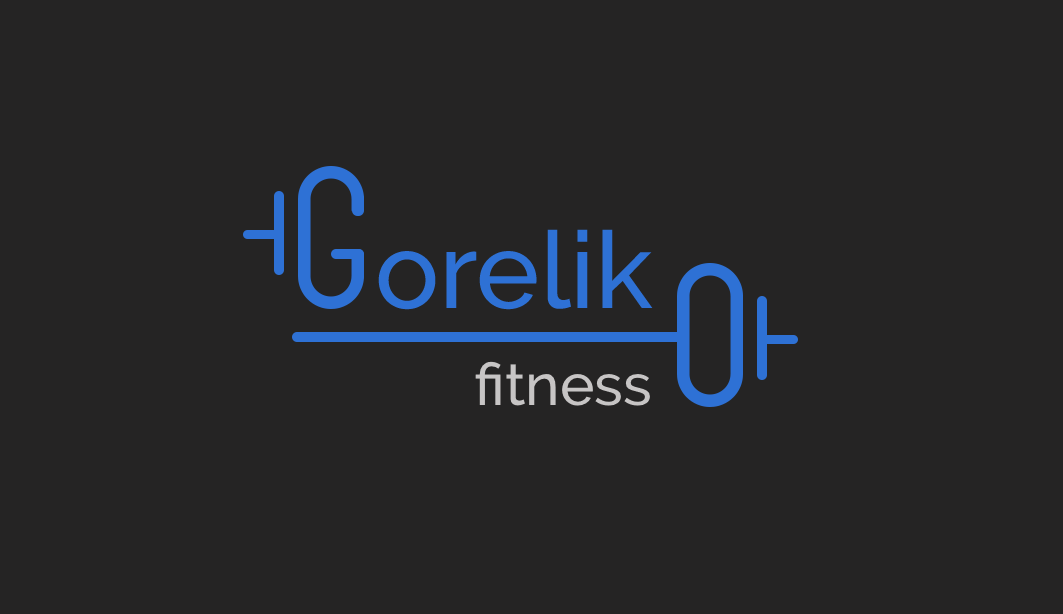
<style>
.page{position:relative;width:1063px;height:614px;background:#252424}
.page>*{position:absolute;margin:0}
.t1{font:106.8px "Raleway-Medium";color:#2e71d5}
.t2{font:58.3px "Raleway-Medium";color:#c7c5c5}
</style>
<div class="page">
<p class="t1" style="left:378px;top:229px;width:275px;height:81px">orelik</p>
<p class="t2" style="left:475px;top:361px;width:175px;height:45px">fitness</p>
</div>
